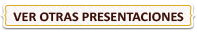
<style>
.page{position:relative;width:197px;height:32px}
.page>*{position:absolute;margin:0}
.t1{font:13.3px "Calibri-Bold";color:#3a0f07;scale:1.05 1}
</style>
<div class="page">
<p class="t1" style="left:13px;top:12px;width:171px;height:10px">VER OTRAS PRESENTACIONES</p>
</div>
